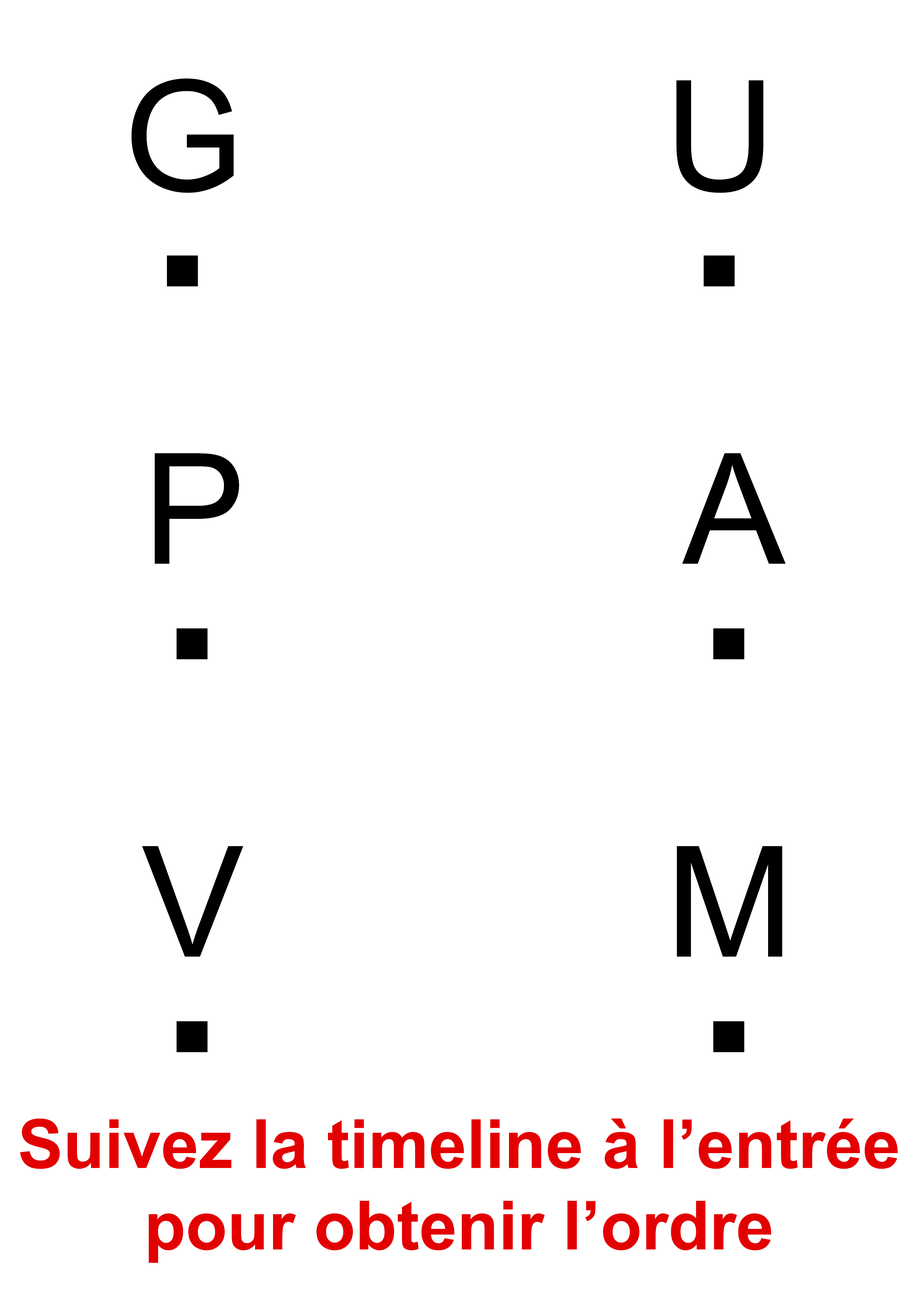
<style>
.page{position:relative;width:918px;height:1299px;background:#ffffff}
.page>*{position:absolute;margin:0}
.t1{font:154.3px "ArialMT";color:#000000}
.t2{font:308.5px "ArialMT";color:#000000}
.t3{font:67.9px "Arial-BoldMT";color:#e30000}
</style>
<div class="page">
<p class="t1" style="left:131px;top:78px;width:103px;height:115px">G</p>
<p class="t1" style="left:676px;top:80px;width:88px;height:113px">U</p>
<p class="t2" style="left:167px;top:255px;width:31px;height:32px">.</p>
<p class="t2" style="left:704px;top:255px;width:31px;height:32px">.</p>
<p class="t1" style="left:155px;top:453px;width:84px;height:111px">P</p>
<p class="t1" style="left:682px;top:453px;width:104px;height:111px">A</p>
<p class="t2" style="left:177px;top:628px;width:31px;height:31px">.</p>
<p class="t2" style="left:713px;top:628px;width:32px;height:31px">.</p>
<p class="t1" style="left:142px;top:846px;width:101px;height:111px">V</p>
<p class="t1" style="left:677px;top:846px;width:106px;height:111px">M</p>
<p class="t2" style="left:177px;top:1021px;width:31px;height:31px">.</p>
<p class="t2" style="left:713px;top:1021px;width:32px;height:31px">.</p>
<p class="t3" style="left:20px;top:1118px;width:878px;height:145px;text-align:center">Suivez la timeline à l’entrée<br>pour obtenir l’ordre</p>
</div>
